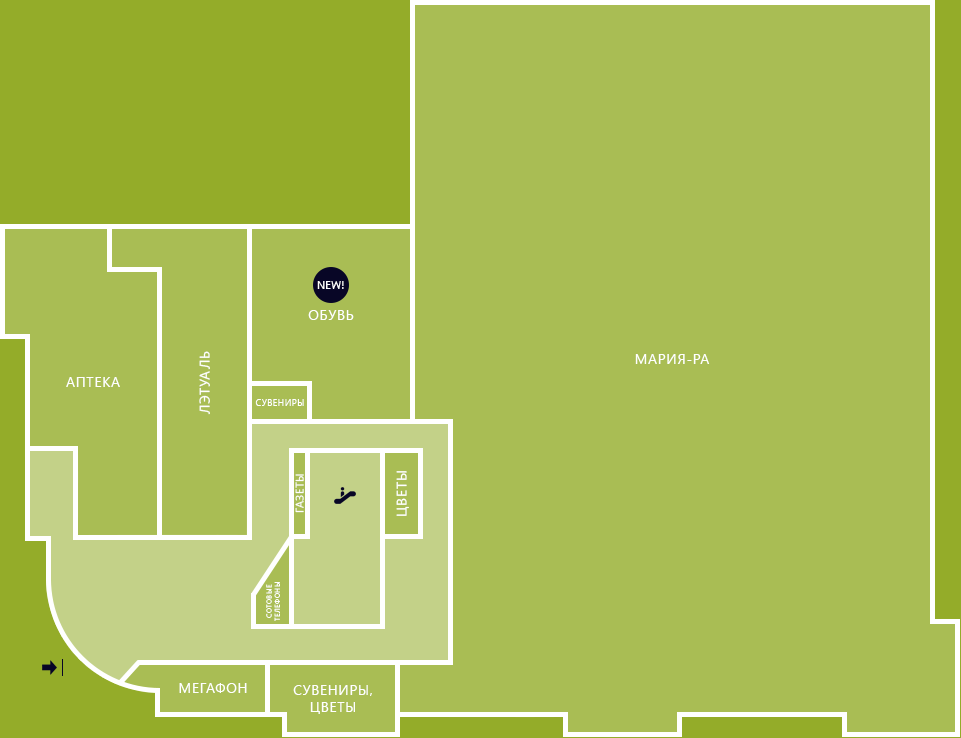
<style>
.page{position:relative;width:961px;height:738px;background:#a9bd54}
.page>*{position:absolute;margin:0}
.t1{font:14px "SegoeUI";letter-spacing:0.05em;color:#ffffff;text-transform:uppercase}
.t2{font:9px "SegoeUI";letter-spacing:0.05em;color:#ffffff;text-transform:uppercase}
.t3{font:11px "SegoeUI";letter-spacing:0.05em;color:#ffffff;text-transform:uppercase}
.t4{font:7px "SegoeUI";letter-spacing:0.05em;color:#ffffff;text-transform:uppercase}
</style>
<div class="page">
<p class="t1" style="left:308px;top:310px;width:46px;height:10px">Обувь</p>
<p class="t1" style="left:199px;top:351px;width:11px;height:64px;rotate:-90deg">Лэтуаль</p>
<p class="t1" style="left:635px;top:354px;width:75px;height:10px">Мария-ра</p>
<p class="t1" style="left:66px;top:377px;width:54px;height:10px">Аптека</p>
<p class="t2" style="left:255px;top:399px;width:49px;height:7px">Сувениры</p>
<p class="t1" style="left:396px;top:471px;width:13px;height:45px;rotate:-90deg">Цветы</p>
<p class="t3" style="left:295px;top:474px;width:9px;height:39px;rotate:-90deg">Газеты</p>
<p class="t4" style="left:266px;top:582px;width:14px;height:39px;text-align:center;rotate:-90deg">Сотовые<br>телефоны</p>
<p class="t1" style="left:179px;top:683px;width:68px;height:10px">Мегафон</p>
<p class="t1" style="left:293px;top:685px;width:79px;height:29px;text-align:center">Сувениры,<br>цветы</p>
</div>
